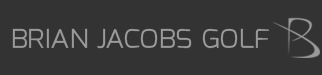
<style>
.page{position:relative;width:322px;height:75px;background:#333333}
.page>*{position:absolute;margin:0}
.t1{font:33.3px "Exo-Light";letter-spacing:-0.025em;color:#9a9a9a;font-variant:small-caps}
</style>
<div class="page">
<p class="t1" style="left:12px;top:28px;width:257px;height:21px">brian jacobs golf</p>
</div>
